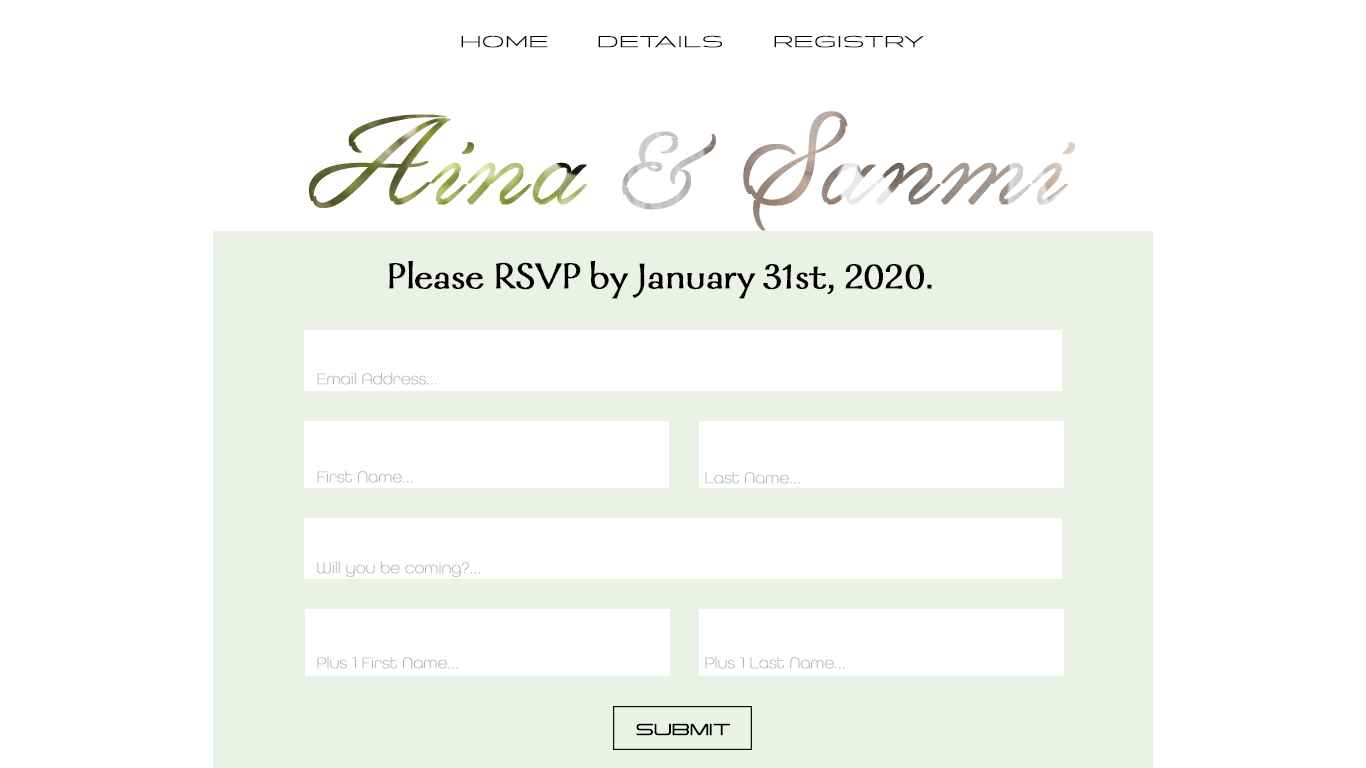
<style>
.page{position:relative;width:1366px;height:768px;background:#ffffff}
.page>*{position:absolute;margin:0}
.t1{font:16px "Briller-Light";color:#000000;font-weight:bold}
.t2{font:40px "GalahadStd-Regular";color:#000000;font-weight:bold}
.t3{font:16px "AllRoundGothic-XLig";color:#adb5b6;font-weight:bold}
.t4{font:16px "Tachyon-Light";color:#000000;font-weight:bold}
</style>
<div class="page">
<p class="t1" style="left:461px;top:35px;width:87px;height:13px">HOME</p>
<p class="t1" style="left:598px;top:35px;width:124px;height:13px">DETAILS</p>
<p class="t1" style="left:774px;top:35px;width:150px;height:13px">REGISTRY</p>
<p class="t2" style="left:389px;top:261px;width:543px;height:38px">Please RSVP by January 31st, 2020.</p>
<p class="t3" style="left:317px;top:372px;width:120px;height:13px">Email Address...</p>
<p class="t3" style="left:317px;top:471px;width:96px;height:12px">First Name...</p>
<p class="t3" style="left:705px;top:472px;width:95px;height:12px">Last Name...</p>
<p class="t3" style="left:317px;top:561px;width:164px;height:16px">Will you be coming?...</p>
<p class="t3" style="left:317px;top:656px;width:141px;height:13px">Plus 1 First Name...</p>
<p class="t3" style="left:705px;top:656px;width:140px;height:13px">Plus 1 Last Name...</p>
<p class="t4" style="left:636px;top:723px;width:94px;height:13px">SUBMIT</p>
</div>
